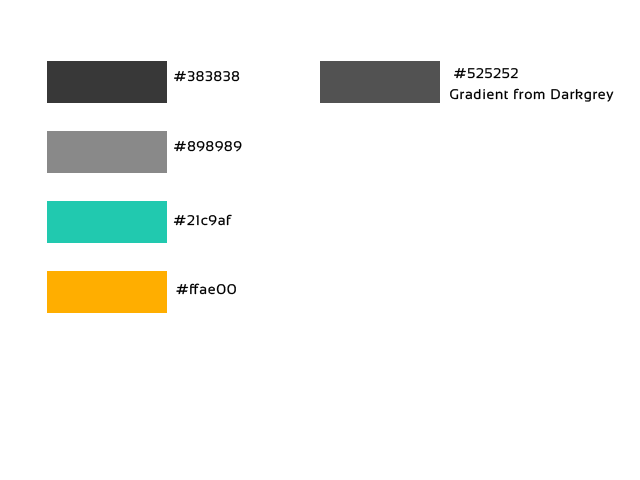
<style>
.page{position:relative;width:640px;height:480px;background:#ffffff}
.page>*{position:absolute;margin:0}
.t1{font:14px "Sansation-Regular";letter-spacing:0.05em;color:#000000}
</style>
<div class="page">
<p class="t1" style="left:174px;top:71px;width:66px;height:11px">#383838</p>
<p class="t1" style="left:454px;top:68px;width:64px;height:11px">#525252</p>
<p class="t1" style="left:450px;top:88px;width:164px;height:14px">Gradient from Darkgrey</p>
<p class="t1" style="left:174px;top:141px;width:68px;height:11px">#898989</p>
<p class="t1" style="left:173px;top:214px;width:59px;height:12px">#21c9af</p>
<p class="t1" style="left:176px;top:283px;width:60px;height:12px">#ffae00</p>
</div>
